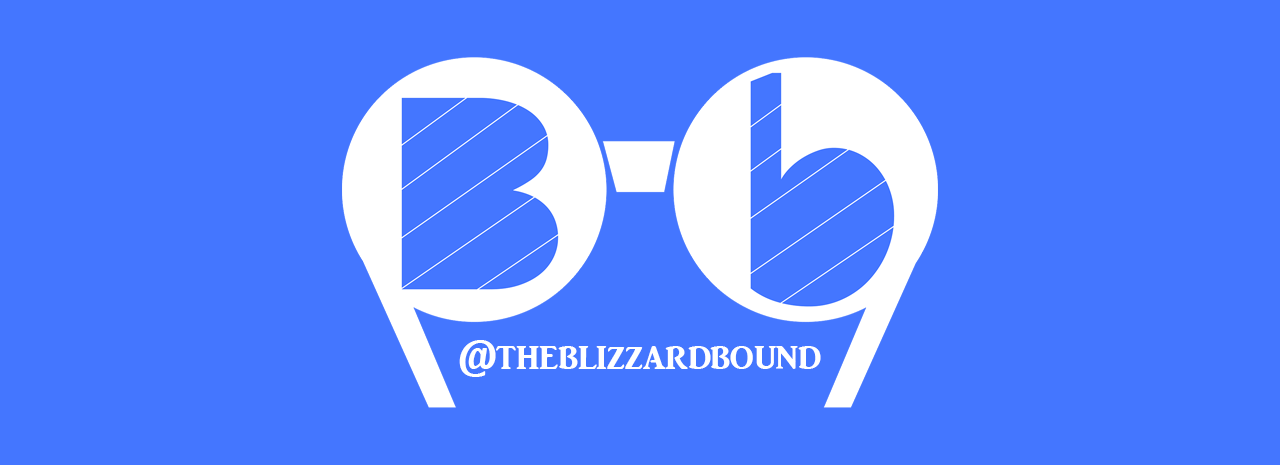
<style>
.page{position:relative;width:1280px;height:465px;background:#4476ff}
.page>*{position:absolute;margin:0}
.t1{font:41.7px "ARJULIAN";color:#ffffff}
</style>
<div class="page">
<p class="t1" style="left:459px;top:340px;width:362px;height:37px">@theblizzardbound</p>
</div>
